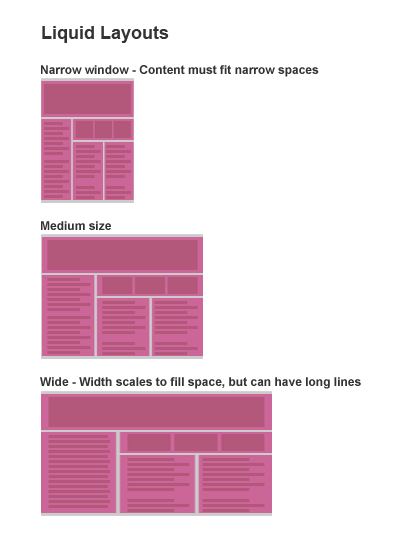
<style>
.page{position:relative;width:400px;height:549px;background:#ffffff}
.page>*{position:absolute;margin:0}
.t1{font:18px "Arial-BoldMT";color:#333333}
.t2{font:12px "Arial-BoldMT";color:#333333}
</style>
<div class="page">
<p class="t1" style="left:42px;top:26px;width:127px;height:17px">Liquid Layouts</p>
<p class="t2" style="left:41px;top:65px;width:278px;height:12px">Narrow window - Content must fit narrow spaces</p>
<p class="t2" style="left:41px;top:221px;width:70px;height:9px">Medium size</p>
<p class="t2" style="left:40px;top:377px;width:321px;height:12px">Wide - Width scales to fill space, but can have long lines</p>
</div>
